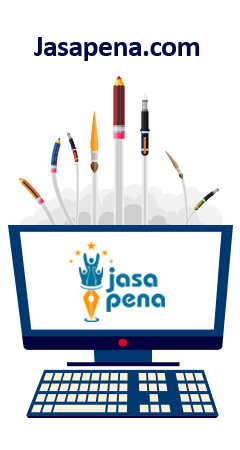
<style>
.page{position:relative;width:240px;height:450px;background:#ffffff}
.page>*{position:absolute;margin:0}
.t1{font:29.8px "Calibri-Bold";letter-spacing:-0.02em;color:#000a45}
</style>
<div class="page">
<p class="t1" style="left:34px;top:37px;width:166px;height:24px">Jasapena.com</p>
</div>
